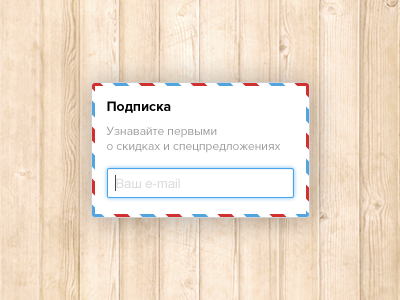
<style>
.page{position:relative;width:400px;height:300px;background:#ffffff}
.page>*{position:absolute;margin:0}
.t1{font:14px "ProximaNova-Bold";color:#000000}
.t2{font:12px "ProximaNova-Regular";color:#9e9e9e}
.t3{font:13px "ArialMT";color:#dcdcdc}
</style>
<div class="page">
<p class="t1" style="left:107px;top:101px;width:64px;height:12px">Подписка</p>
<p class="t2" style="left:106px;top:126px;width:175px;height:27px">Узнавайте первыми<br>о скидках и спецпредложениях</p>
<p class="t3" style="left:116px;top:178px;width:64px;height:10px">Ваш e-mail</p>
</div>
